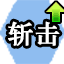
<style>
.page{position:relative;width:64px;height:64px;background:#8fbdf0}
.page>*{position:absolute;margin:0}
.t1{font:25px "TypographyOldP-Medium";color:#ffffff;font-weight:bold}
</style>
<div class="page">
<p class="t1" style="left:8px;top:21px;width:52px;height:25px">斩击</p>
</div>
